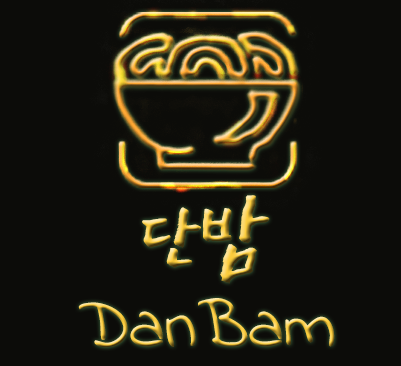
<style>
.page{position:relative;width:401px;height:366px;background:#0c0c09}
.page>*{position:absolute;margin:0}
.t1{font:104.3px "EastSeaDokdo-Regular"}
.t2{font:69.5px "IndieFlower"}
</style>
<div class="page">
<p class="t1" style="left:142px;top:195px;width:128px;height:89px">단밤</p>
<p class="t2" style="left:78px;top:298px;width:257px;height:50px">DanBam</p>
</div>
